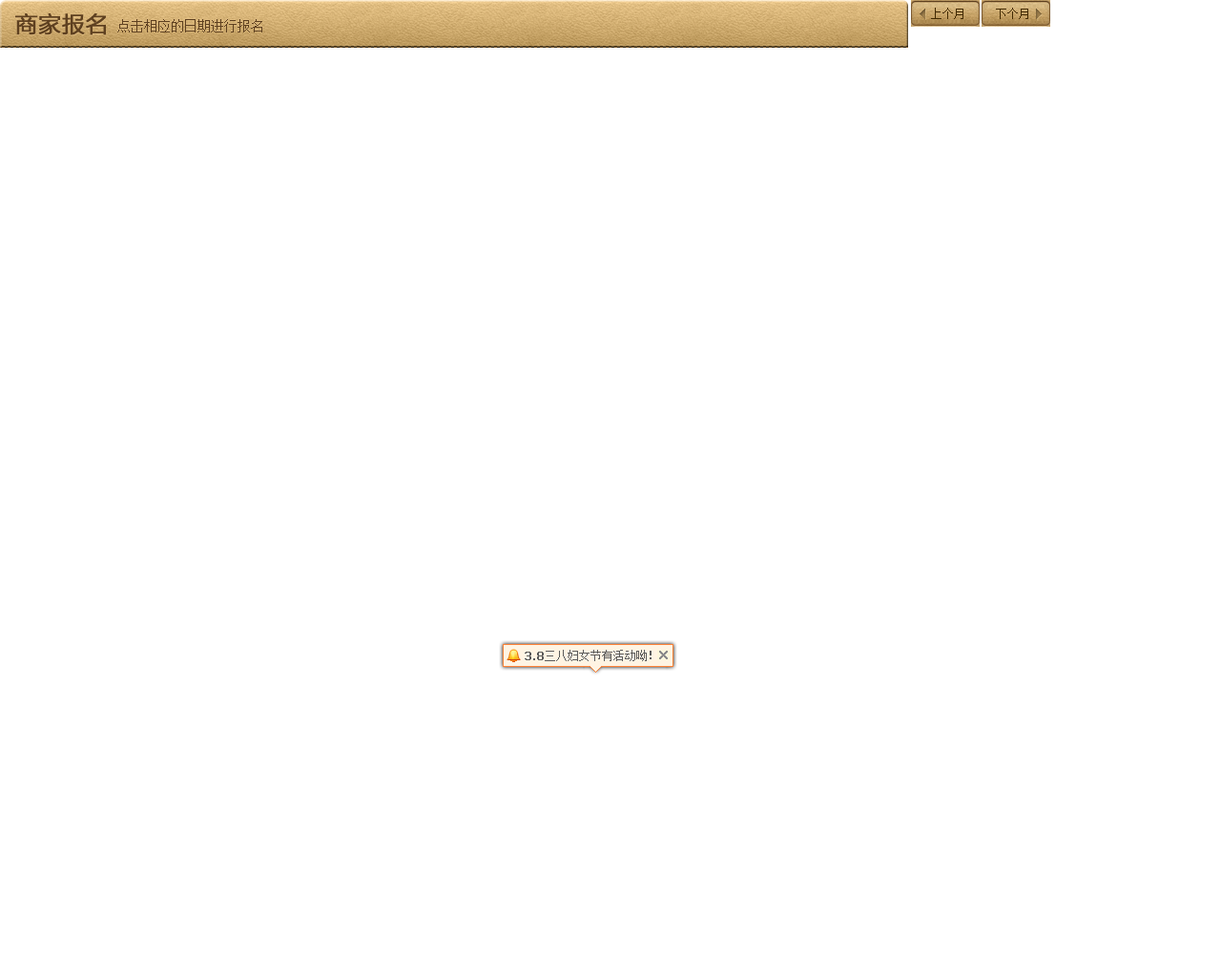
<style>
.page{position:relative;width:1221px;height:977px;background:#ffffff}
.page>*{position:absolute;margin:0}
.t1{font:22.9px "FZLTHK--GBK1-0";font-weight:bold}
.t2{font:22.9px "FZLTHK--GBK1-0";color:#5e4020;font-weight:bold}
.t3{font:13.4px "SimSun";color:#5e4020}
.t4{font:11.4px "SimSun";color:#5b5b5b}
.t5{font:11.4px "Tahoma";color:#5b5b5b;font-weight:bold}
</style>
<div class="page">
<p class="t1" style="left:15px;top:14px;width:91px;height:22px">商家报名</p>
<p class="t2" style="left:15px;top:13px;width:91px;height:22px">商家报名</p>
<p class="t3" style="left:117px;top:19px;width:145px;height:13px">点击相应的日期进行报名</p>
<p class="t4" style="left:525px;top:650px;width:126px;height:11px"><span class="t5">3.8</span>三八妇女节有活动呦！</p>
</div>
